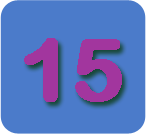
<style>
.page{position:relative;width:146px;height:134px;background:#4b7bca}
.page>*{position:absolute;margin:0}
.t1{font:86.1px "ArialRoundedMTBold";letter-spacing:-0.01em;color:#a2369e;font-weight:bold}
</style>
<div class="page">
<p class="t1" style="left:24px;top:38px;width:98px;height:64px">15</p>
</div>
